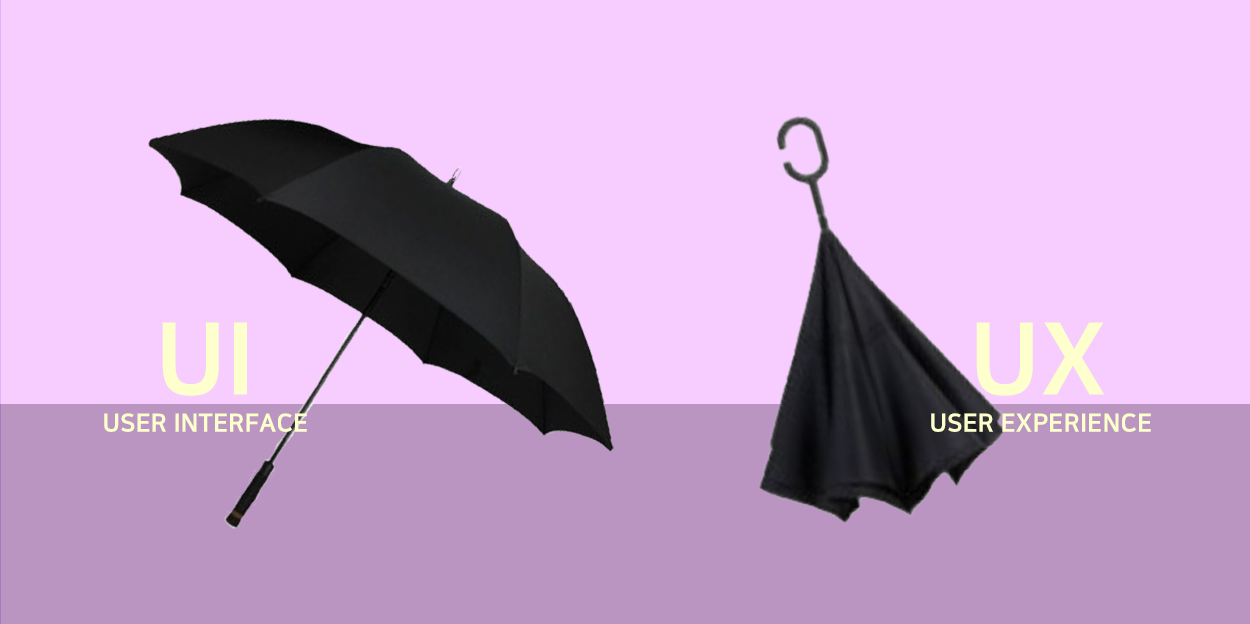
<style>
.page{position:relative;width:1250px;height:624px;background:#f7cdff}
.page>*{position:absolute;margin:0}
.t1{font:100px "NanumSquareOTF_acEB";color:#fdffcc}
.t2{font:25px "NanumSquareOTF_acEB";color:#fdffcc}
</style>
<div class="page">
<p class="t1" style="left:162px;top:322px;width:85px;height:74px">UI</p>
<p class="t1" style="left:976px;top:322px;width:129px;height:74px">UX</p>
<p class="t2" style="left:104px;top:413px;width:203px;height:19px">USER INTERFACE</p>
<p class="t2" style="left:931px;top:413px;width:220px;height:19px">USER EXPERIENCE</p>
</div>
